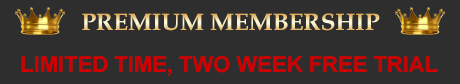
<style>
.page{position:relative;width:460px;height:84px;background:#2e2e2e}
.page>*{position:absolute;margin:0}
.t1{font:24px "BookAntiqua-Bold"}
.t2{font:22px "Arial-BoldMT";color:#d10000}
</style>
<div class="page">
<p class="t1" style="left:82px;top:13px;width:298px;height:18px">PREMIUM MEMBERSHIP</p>
<p class="t2" style="left:21px;top:56px;width:417px;height:20px">LIMITED TIME, TWO WEEK FREE TRIAL</p>
</div>
